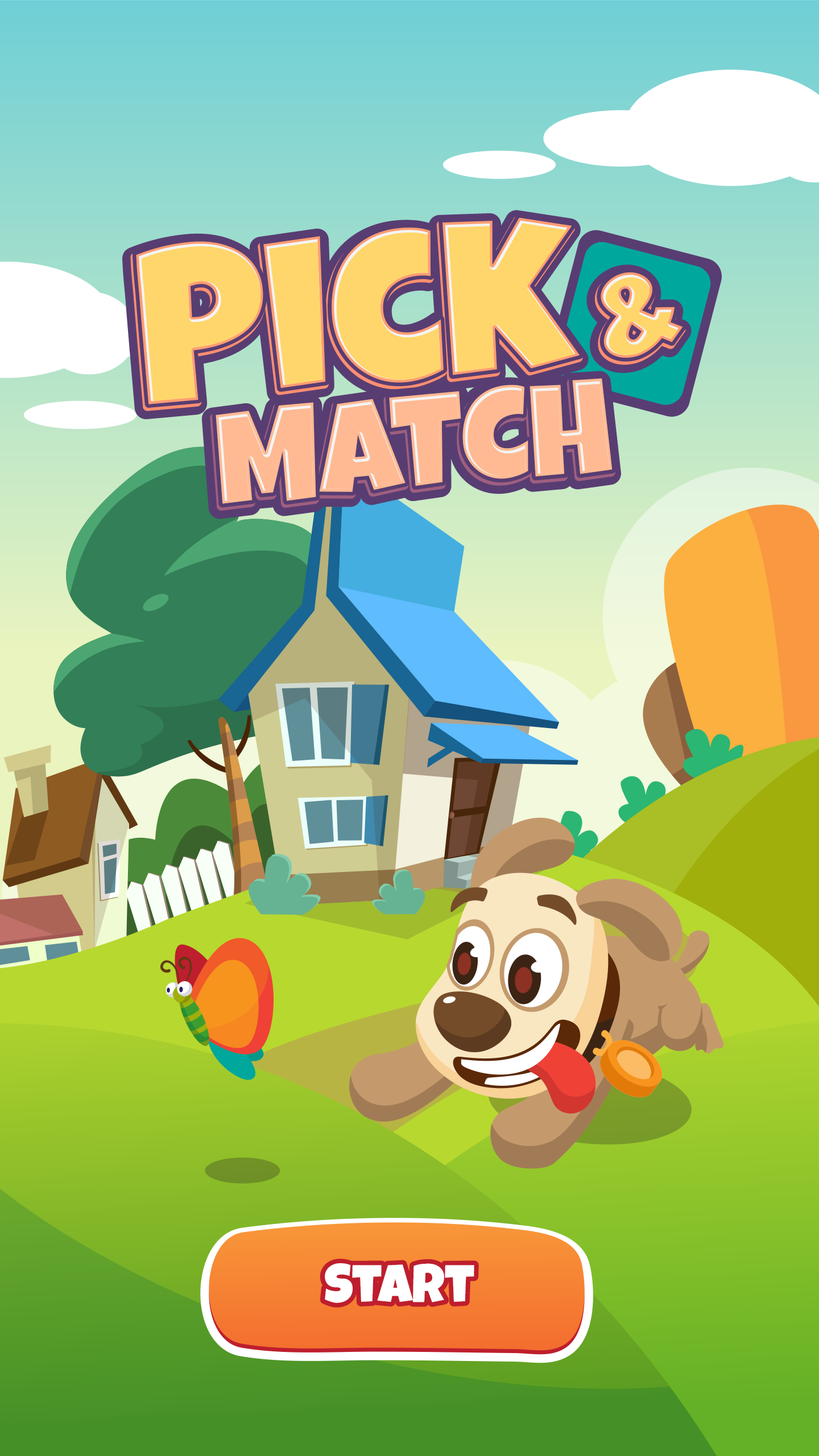
<style>
.page{position:relative;width:819px;height:1456px}
.page>*{position:absolute;margin:0}
.t1{font:218.5px "LuckiestGuy-Regular";color:#ffd66b}
.t2{font:126.3px "LuckiestGuy-Regular"}
.t3{font:131.5px "LuckiestGuy-Regular";color:#ffba93}
.t4{font:54.1px "LuckiestGuy-Regular";color:#ffffff}
</style>
<div class="page">
<p class="t1" style="left:136px;top:217px;width:444px;height:187px">Pick</p>
<p class="t2" style="left:601px;top:272px;width:82px;height:86px">&amp;</p>
<p class="t3" style="left:216px;top:378px;width:397px;height:126px">MATCH</p>
<p class="t4" style="left:325px;top:1263px;width:149px;height:40px">Start</p>
<p class="t4" style="left:325px;top:1263px;width:149px;height:40px">Start</p>
</div>
